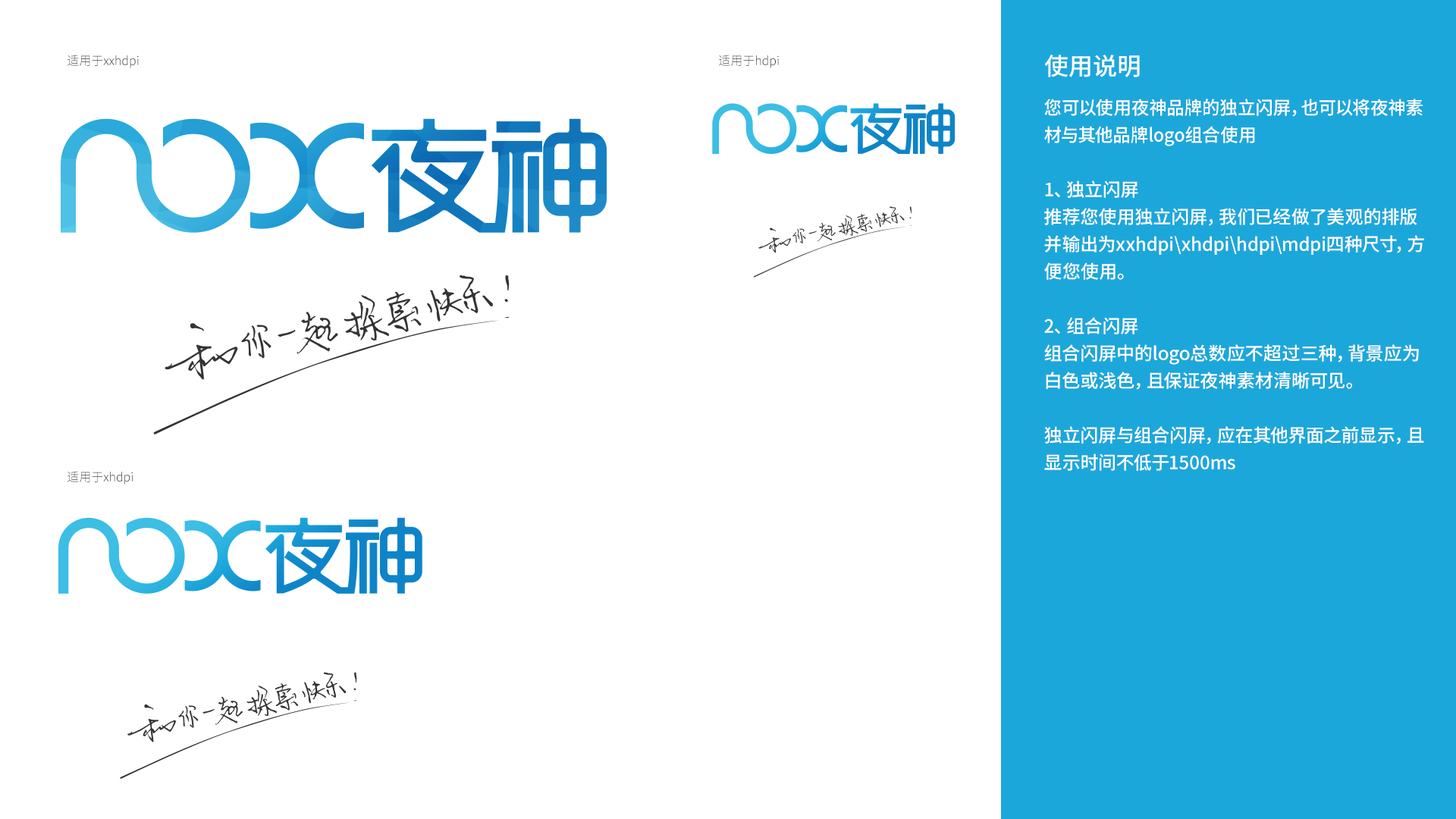
<style>
.page{position:relative;width:1456px;height:819px;background:#ffffff}
.page>*{position:absolute;margin:0}
.t1{font:12.1px "NotoSansHans-Light";color:#333333}
.t2{font:24.3px "NotoSansHans-Medium";color:#ffffff}
.t3{font:18.2px/27.3px "NotoSansHans-Medium";color:#ffffff}
</style>
<div class="page">
<p class="t1" style="left:67px;top:55px;width:72px;height:13px">适用于xxhdpi</p>
<p class="t1" style="left:719px;top:55px;width:60px;height:13px">适用于hdpi</p>
<p class="t2" style="left:1044px;top:55px;width:96px;height:22px">使用说明</p>
<p class="t3" style="left:1044px;top:99px;width:380px;height:372px">您可以使用夜神品牌的独立闪屏，也可以将夜神素材与其他品牌logo组合使用<br><br>1、独立闪屏<br>推荐您使用独立闪屏，我们已经做了美观的排版并输出为xxhdpi\xhdpi\hdpi\mdpi四种尺寸，方便您使用。<br><br>2、组合闪屏<br>组合闪屏中的logo总数应不超过三种，背景应为白色或浅色，且保证夜神素材清晰可见。<br><br>独立闪屏与组合闪屏，应在其他界面之前显示，且显示时间不低于1500ms</p>
<p class="t1" style="left:67px;top:471px;width:66px;height:14px">适用于xhdpi</p>
</div>
